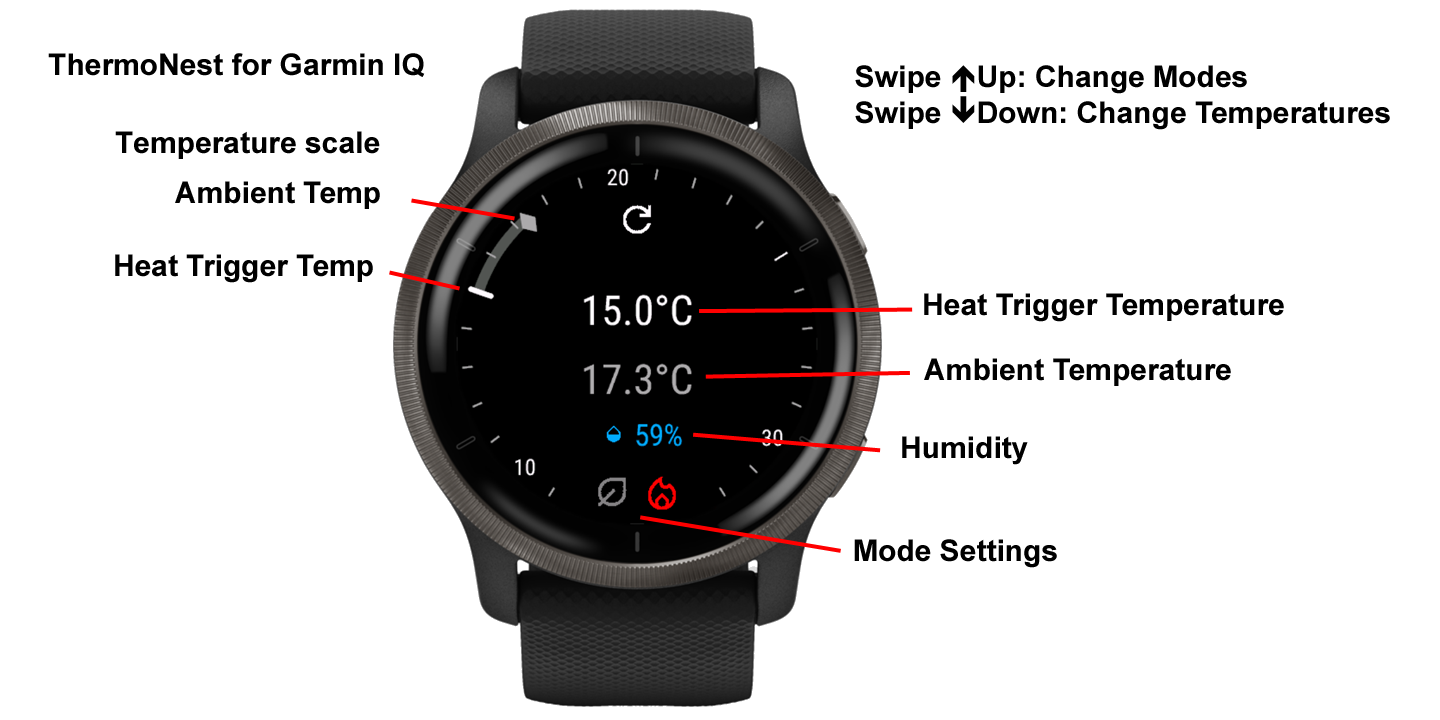
<style>
.page{position:relative;width:1440px;height:720px;background:#ffffff}
.page>*{position:absolute;margin:0}
.t1{font:30px "Arial-BoldMT";color:#000000}
.t2{font:30px "Wingdings-Regular";color:#000000}
</style>
<div class="page">
<p class="t1" style="left:48px;top:53px;width:377px;height:24px">ThermoNest for Garmin IQ</p>
<p class="t1" style="left:855px;top:65px;width:535px;height:65px">Swipe <span class="t2">é</span>Up: Change Modes<br>Swipe <span class="t2">ê</span>Down: Change Temperatures</p>
<p class="t1" style="left:115px;top:131px;width:265px;height:28px">Temperature scale</p>
<p class="t1" style="left:175px;top:181px;width:205px;height:28px">Ambient Temp</p>
<p class="t1" style="left:115px;top:254px;width:258px;height:29px">Heat Trigger Temp</p>
<p class="t1" style="left:924px;top:293px;width:360px;height:29px">Heat Trigger Temperature</p>
<p class="t1" style="left:924px;top:358px;width:307px;height:28px">Ambient Temperature</p>
<p class="t1" style="left:902px;top:436px;width:126px;height:29px">Humidity</p>
<p class="t1" style="left:854px;top:539px;width:203px;height:29px">Mode Settings</p>
</div>
